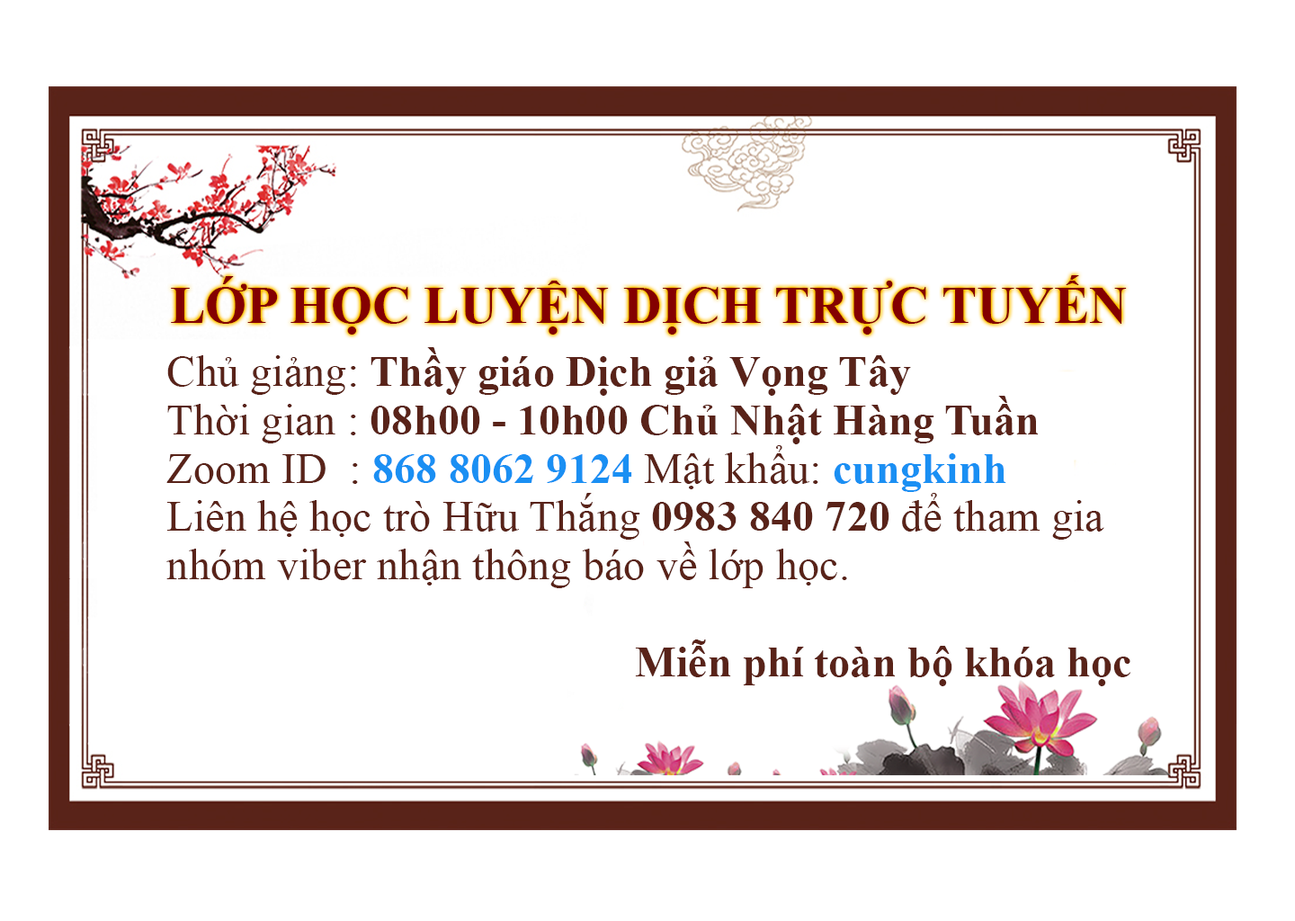
<style>
.page{position:relative;width:1295px;height:921px;background:#ffffff}
.page>*{position:absolute;margin:0}
.t1{font:53.2px "TimesNewRomanPS-BoldMT";color:#840001;text-transform:uppercase}
.t2{font:43.5px/48.4px "TimesNewRomanPSMT";color:#592319}
.t3{font:43.5px/48.4px "TimesNewRomanPS-BoldMT";color:#592319}
.t4{font:43.5px/48.4px "TimesNewRomanPS-BoldMT";color:#1a8ff3}
</style>
<div class="page">
<p class="t1" style="left:171px;top:275px;width:956px;height:60px">lớp học LUyện dịch trực tuyến</p>
<p class="t2" style="left:166px;top:347px;width:965px;height:339px">Chủ giảng: <span class="t3">Thầy giáo Dịch giả Vọng Tây<br></span>Thời gian : <span class="t3">08h00 - 10h00 Chủ Nhật Hàng Tuần<br></span>Zoom ID  : <span class="t4">868 8062 9124</span> Mật khẩu: <span class="t4">cungkinh<br></span>Liên hệ học trò Hữu Thắng <span class="t3">0983 840 720</span> để tham gia nhóm viber nhận thông báo về lớp học.<br><span class="t3"><br>Miễn phí toàn bộ khóa học</span></p>
</div>
